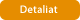
<style>
.page{position:relative;width:80px;height:20px;background:#e68d00}
.page>*{position:absolute;margin:0}
.t1{font:11px "MyriadPro-Semibold";color:#ffffff}
</style>
<div class="page">
<p class="t1" style="left:20px;top:5px;width:38px;height:8px">Detaliat</p>
</div>
